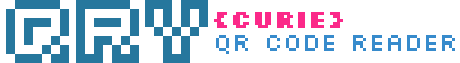
<style>
.page{position:relative;width:460px;height:63px;background:#ffffff}
.page>*{position:absolute;margin:0}
.t1{font:72px "ErixOutline";letter-spacing:0.1em;color:#26779e}
.t2{font:27px "Silkscreen-Bold";color:#fb2989}
.t3{font:27px "Silkscreen";color:#378bcc}
</style>
<div class="page">
<p class="t1" style="left:6px;top:0px;width:202px;height:63px">QRY</p>
<p class="t2" style="left:214px;top:12px;width:129px;height:16px">{curie}</p>
<p class="t3" style="left:216px;top:35px;width:239px;height:19px">QR code reader</p>
</div>
